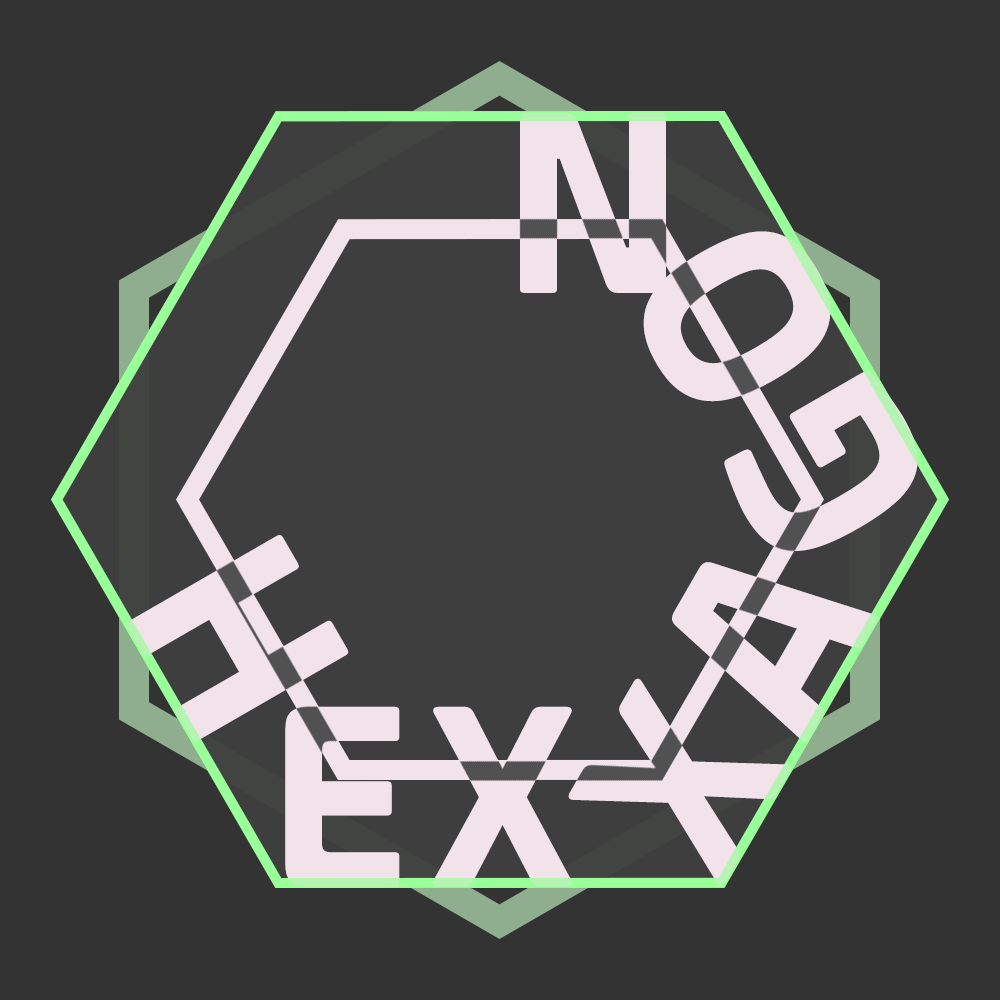
<style>
.page{position:relative;width:1000px;height:1000px;background:#333333}
.page>*{position:absolute;margin:0}
.t1{font:200px "RecipekoreaM";letter-spacing:0.08em;color:#f2e3ea}
</style>
<div class="page">
<p class="t1" style="left:126px;top:113px;width:792px;height:774px;rotate:-30deg">HEXXAGON</p>
</div>
